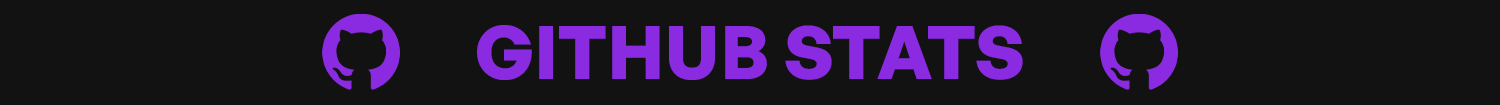
<style>
.page{position:relative;width:1500px;height:105px;background:#121212}
.page>*{position:absolute;margin:0}
.t1{font:73.8px "GeneralSansVariable-Bold";color:#8a2be2;text-transform:uppercase}
</style>
<div class="page">
<p class="t1" style="left:477px;top:25px;width:546px;height:55px">GITHUB STATS</p>
</div>
